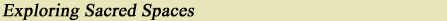
<style>
.page{position:relative;width:447px;height:21px;background:#e6e6b8}
.page>*{position:absolute;margin:0}
.t1{font:18px "TimesNewRomanPSMT";color:#010101;font-weight:bold;font-style:italic}
</style>
<div class="page">
<p class="t1" style="left:2px;top:3px;width:193px;height:18px">Exploring Sacred Spaces</p>
</div>
